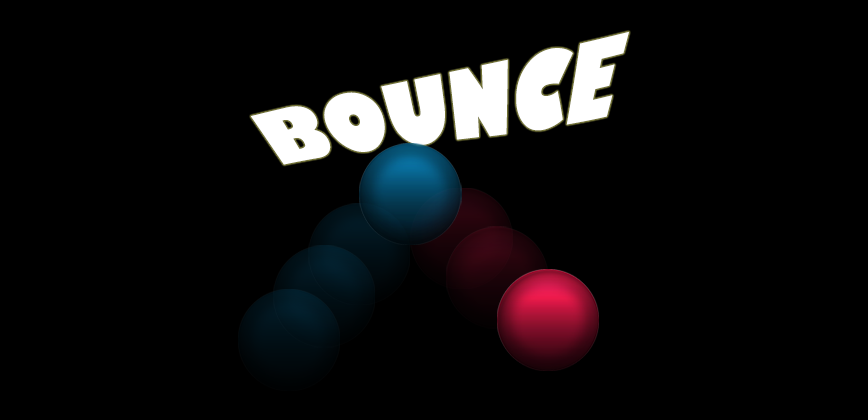
<style>
.page{position:relative;width:868px;height:420px;background:#000000}
.page>*{position:absolute;margin:0}
.t1{font:89.1px "GillSans-UltraBold";color:#ffffff;text-transform:uppercase;scale:0.8 1}
</style>
<div class="page">
<p class="t1" style="left:251px;top:31px;width:378px;height:134px;rotate:-10deg">Bounce</p>
</div>
